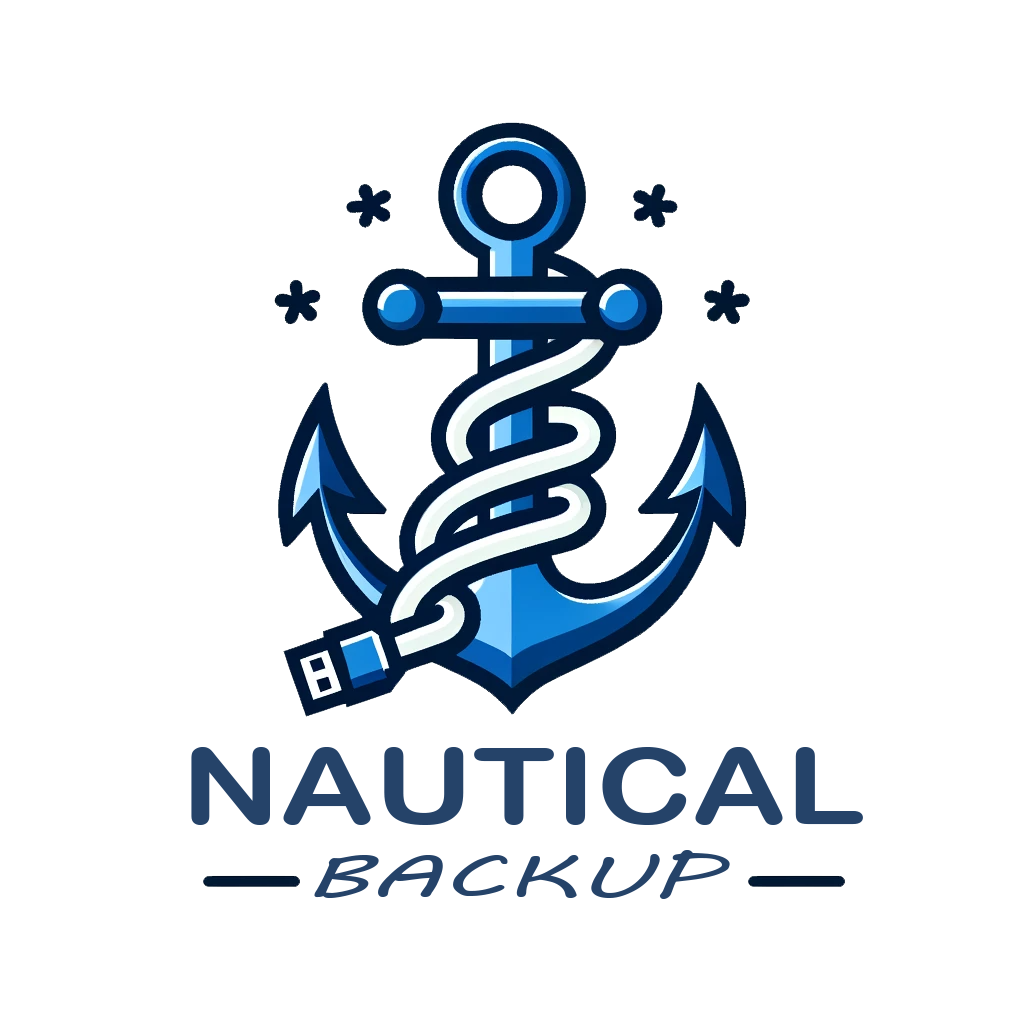
<style>
.page{position:relative;width:1024px;height:1024px;background:#ffffff}
.page>*{position:absolute;margin:0}
.t1{font:106px "ArialRoundedMTBold";color:#254369;scale:1.23 1}
.t2{font:59.4px "MVBoli";color:#254369;scale:1.77 1}
</style>
<div class="page">
<p class="t1" style="left:191px;top:747px;width:672px;height:78px">NAUTICAL</p>
<p class="t2" style="left:314px;top:850px;width:416px;height:49px">BACKUP</p>
</div>
